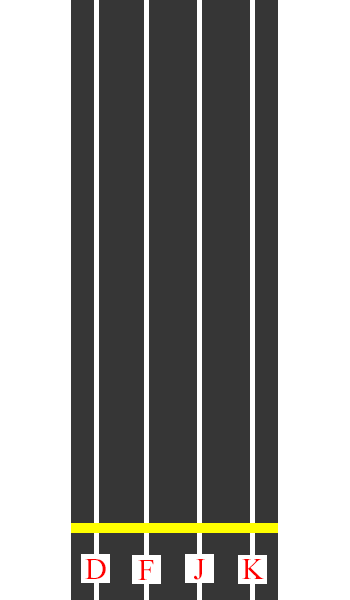
<style>
.page{position:relative;width:350px;height:600px;background:#363636}
.page>*{position:absolute;margin:0}
.t1{font:30px "TimesNewRomanPSMT";color:#ff0000}
</style>
<div class="page">
<p class="t1" style="left:85px;top:559px;width:21px;height:20px">D</p>
<p class="t1" style="left:138px;top:560px;width:16px;height:20px">F</p>
<p class="t1" style="left:194px;top:559px;width:11px;height:21px">J</p>
<p class="t1" style="left:242px;top:559px;width:22px;height:20px">K</p>
</div>
